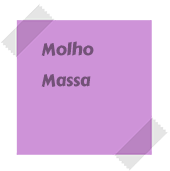
<style>
.page{position:relative;width:170px;height:171px;background:#ce93d8}
.page>*{position:absolute;margin:0}
.t1{font:13.2px/100.8px "CarterOne";letter-spacing:-0.02em;color:#735278}
.t2{font:17.4px/31.2px "CarterOne";letter-spacing:-0.02em;color:#735278}
</style>
<div class="page">
<p class="t1" style="left:41px;top:41px;width:53px;height:46px"><span class="t2">Molho<br>Massa<br></span> <br>Farinha<br>Ovos</p>
</div>
